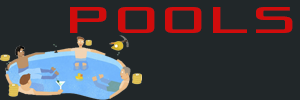
<style>
.page{position:relative;width:300px;height:100px;background:#212729}
.page>*{position:absolute;margin:0}
.t1{font:40.1px "Xolonium";letter-spacing:0.1em;color:#d10c0c;scale:1.2 1}
</style>
<div class="page">
<p class="t1" style="left:70px;top:7px;width:223px;height:26px">POOLS</p>
</div>
